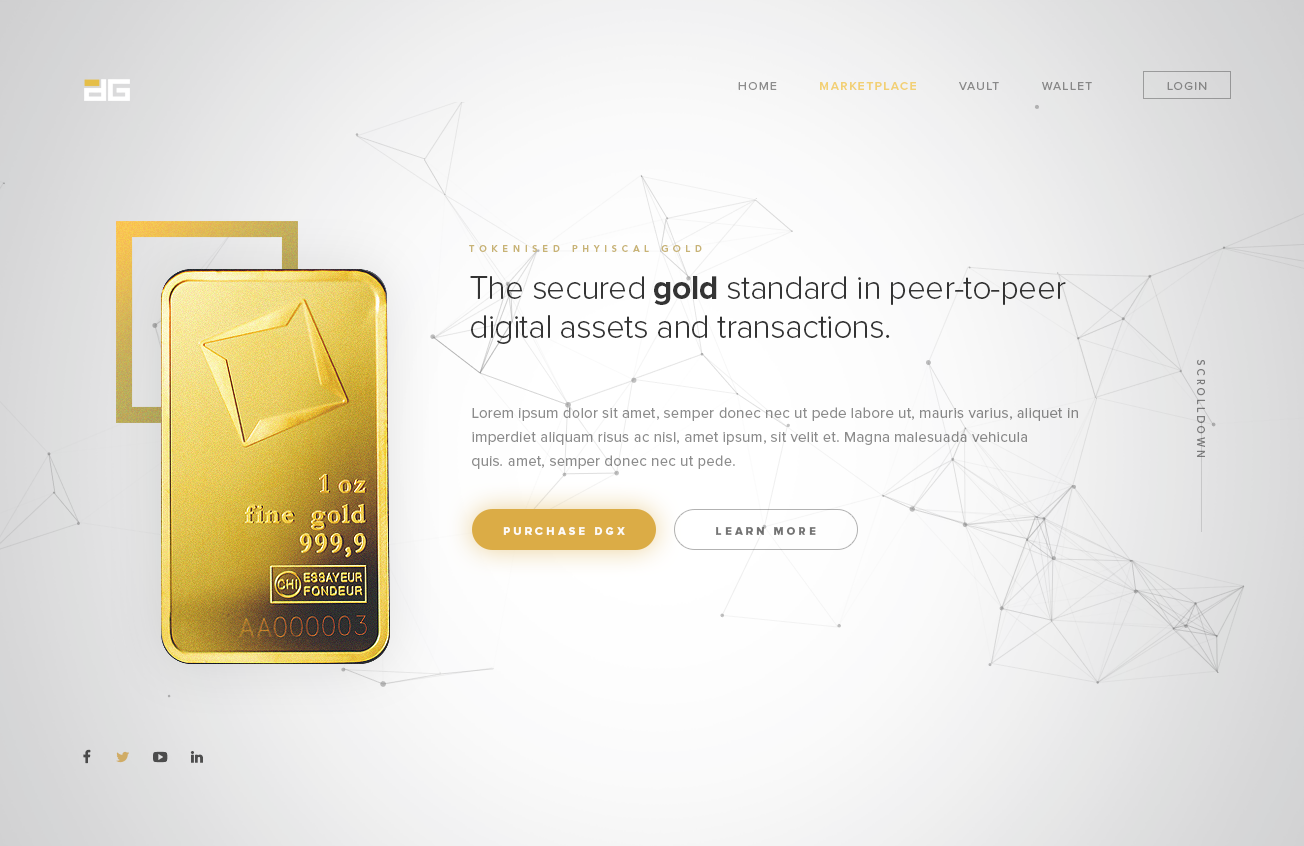
<style>
.page{position:relative;width:1304px;height:846px}
.page>*{position:absolute;margin:0}
.t1{font:12px "ProximaNova-Regular";letter-spacing:0.12em;text-transform:uppercase}
.t2{font:12px "ProximaNova-Semibold";letter-spacing:0.12em;text-transform:uppercase}
.t3{font:9px "AvenirLTStd-Heavy";letter-spacing:0.54em;color:#c8b375;text-transform:uppercase}
.t4{font:34px/39.3px "ProximaNova-Light";letter-spacing:-0.02em;color:#343434}
.t5{font:34px/39.3px "ProximaNova-Bold";letter-spacing:-0.02em;color:#343434}
.t6{font:10px "AvenirLTStd-Medium";letter-spacing:0.32em;color:#7d7d7d;text-transform:uppercase}
.t7{font:15px/24.1px "ProximaNova-Regular";letter-spacing:0.02em;color:#8c8c8c}
.t8{font:11px "ProximaNova-Extrabld";letter-spacing:0.3em;color:#ffffff;text-transform:uppercase}
.t9{font:11px "ProximaNova-Extrabld";letter-spacing:0.3em;color:#737373;text-transform:uppercase}
</style>
<div class="page">
<p class="t1" style="left:738px;top:82px;width:469px;height:8px">home         <span class="t2">marketplace         </span>vault         wallet                login</p>
<p class="t3" style="left:469px;top:245px;width:233px;height:7px">tokenised phyiscal gold</p>
<p class="t4" style="left:470px;top:276px;width:596px;height:68px">The secured <span class="t5">gold</span> standard in peer-to-peer<br>digital assets and transactions.</p>
<p class="t6" style="left:1197px;top:359px;width:8px;height:98px;rotate:90deg">scrolldown</p>
<p class="t7" style="left:472px;top:407px;width:606px;height:62px">Lorem ipsum dolor sit amet, semper donec nec ut pede labore ut, mauris varius, aliquet in<br>imperdiet aliquam risus ac nisl, amet ipsum, sit velit et. Magna malesuada vehicula<br>quis. amet, semper donec nec ut pede.</p>
<p class="t8" style="left:503px;top:527px;width:122px;height:8px;opacity:0.95">purchase dgx</p>
<p class="t9" style="left:716px;top:527px;width:100px;height:8px">learn more</p>
</div>
